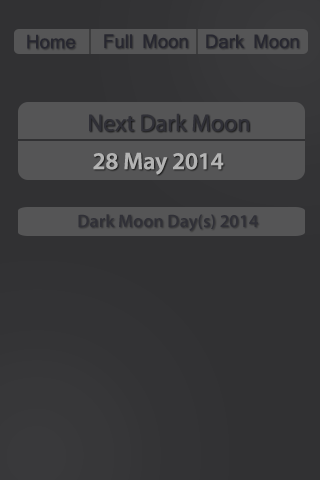
<style>
.page{position:relative;width:320px;height:480px;background:#313133}
.page>*{position:absolute;margin:0}
.t1{font:18px "Mangal";color:#272730}
.t2{font:24px "MyriadPro-Regular";color:#303037}
.t3{font:24px "MyriadPro-Semibold";color:#b3b3b3}
.t4{font:18px "MyriadPro-Semibold";color:#303037}
</style>
<div class="page">
<p class="t1" style="left:27px;top:34px;width:49px;height:15px">Home</p>
<p class="t1" style="left:104px;top:34px;width:84px;height:15px">Full Moon</p>
<p class="t1" style="left:206px;top:34px;width:93px;height:15px">Dark Moon</p>
<p class="t2" style="left:89px;top:113px;width:160px;height:19px">Next Dark Moon</p>
<p class="t3" style="left:93px;top:152px;width:131px;height:23px">28 May 2014</p>
<p class="t4" style="left:78px;top:214px;width:180px;height:17px">Dark Moon Day(s) 2014</p>
</div>
